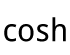
<style>
.page{position:relative;width:70px;height:55px;background:#ffffff}
.page>*{position:absolute;margin:0}
.t1{font:31.8px "DroidSans";color:#000000}
</style>
<div class="page">
<p class="t1" style="left:4px;top:17px;width:62px;height:25px">cosh</p>
</div>
